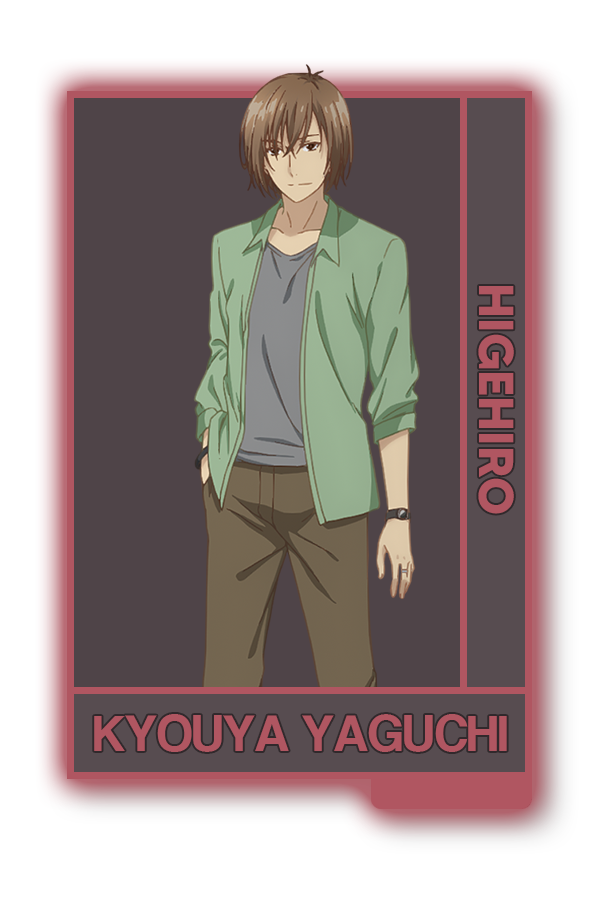
<style>
.page{position:relative;width:600px;height:900px;background:#4f4448}
.page>*{position:absolute;margin:0}
.t1{font:48.8px "MADETOMMY-Bold";color:#b05661}
.t2{font:53.1px "CoolveticaRg-Regular";color:#b05661}
</style>
<div class="page">
<p class="t1" style="left:478px;top:286px;width:36px;height:228px;rotate:90deg">HIGEHIRO</p>
<p class="t2" style="left:94px;top:714px;width:413px;height:38px">KYOUYA YAGUCHI</p>
</div>
